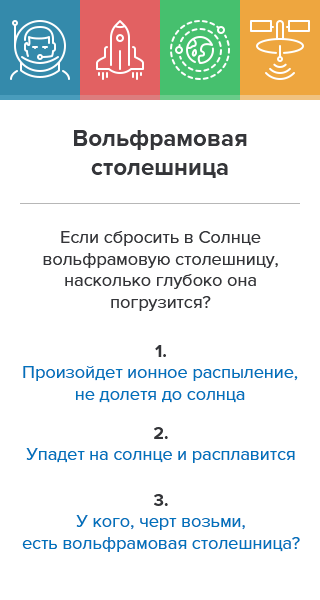
<style>
.page{position:relative;width:320px;height:600px;background:#ffffff}
.page>*{position:absolute;margin:0}
.t1{font:24px "ProximaNova-Bold";color:#343539}
.t2{font:18px "ProximaNova-Regular";color:#343539}
.t3{font:18px "ProximaNova-Bold";color:#343539}
.t4{font:18px "ProximaNova-Regular";color:#0072bc}
</style>
<div class="page">
<p class="t1" style="left:74px;top:130px;width:173px;height:48px;text-align:center">Вольфрамовая<br>столешница</p>
<p class="t2" style="left:43px;top:231px;width:235px;height:80px;text-align:center">Если сбросить в Солнце вольфрамовую столешницу, насколько глубоко она погрузится?</p>
<p class="t3" style="left:155px;top:345px;width:11px;height:12px">1.</p>
<p class="t4" style="left:23px;top:366px;width:275px;height:37px;text-align:center">Произойдет ионное распыление,<br>не долетя до солнца</p>
<p class="t3" style="left:154px;top:427px;width:14px;height:12px">2.</p>
<p class="t4" style="left:26px;top:448px;width:269px;height:15px">Упадет на солнце и расплавится</p>
<p class="t3" style="left:154px;top:494px;width:14px;height:12px">3.</p>
<p class="t4" style="left:22px;top:515px;width:278px;height:37px;text-align:center">У кого, черт возьми,<br>есть вольфрамовая столешница?</p>
</div>
